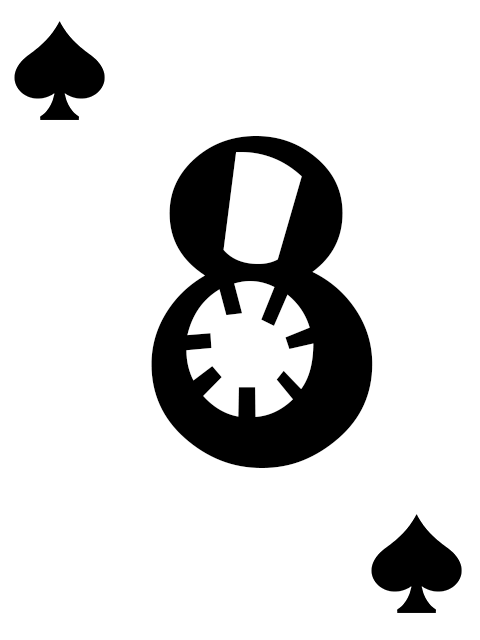
<style>
.page{position:relative;width:480px;height:640px;background:#ffffff}
.page>*{position:absolute;margin:0}
.t1{font:386.3px "Jokerman-Regular";color:#000000}
</style>
<div class="page">
<p class="t1" style="left:151px;top:136px;width:222px;height:332px">8</p>
</div>
